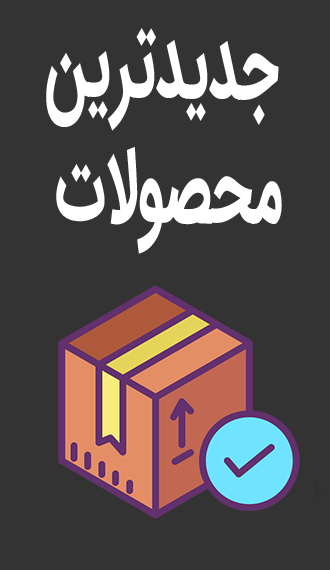
<style>
.page{position:relative;width:330px;height:570px;background:#333333}
.page>*{position:absolute;margin:0}
.t1{font:51.7px "IRANSansWeb-Bold";color:#ffffff;scale:0.56 1}
</style>
<div class="page">
<p class="t1" style="left:46px;top:28px;width:236px;height:226px;text-align:center;rotate:1deg">جدیدترین<br> محصولات</p>
</div>
